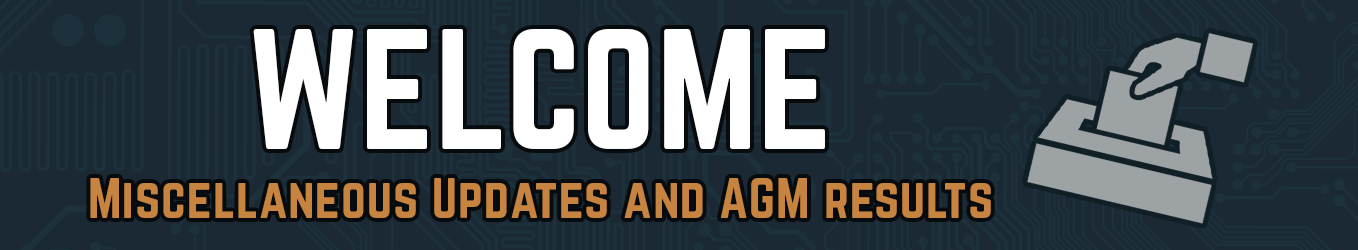
<style>
.page{position:relative;width:1358px;height:250px;background:#1b2934}
.page>*{position:absolute;margin:0}
.t1{font:150px "Norwester-Regular";letter-spacing:0.002em;color:#ffffff}
.t2{font:50px "Norwester-Regular";letter-spacing:0.02em;color:#c78440}
</style>
<div class="page">
<p class="t1" style="left:253px;top:29px;width:572px;height:120px">WELCOME</p>
<p class="t2" style="left:90px;top:178px;width:901px;height:40px">Miscellaneous Updates and AGM results</p>
</div>
